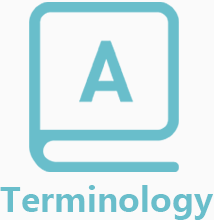
<style>
.page{position:relative;width:214px;height:220px;background:#fafafa}
.page>*{position:absolute;margin:0}
.t1{font:33.3px "MicrosoftYaHei-Bold";color:#69becb}
</style>
<div class="page">
<p class="t1" style="left:0px;top:185px;width:213px;height:35px">Terminology</p>
</div>
